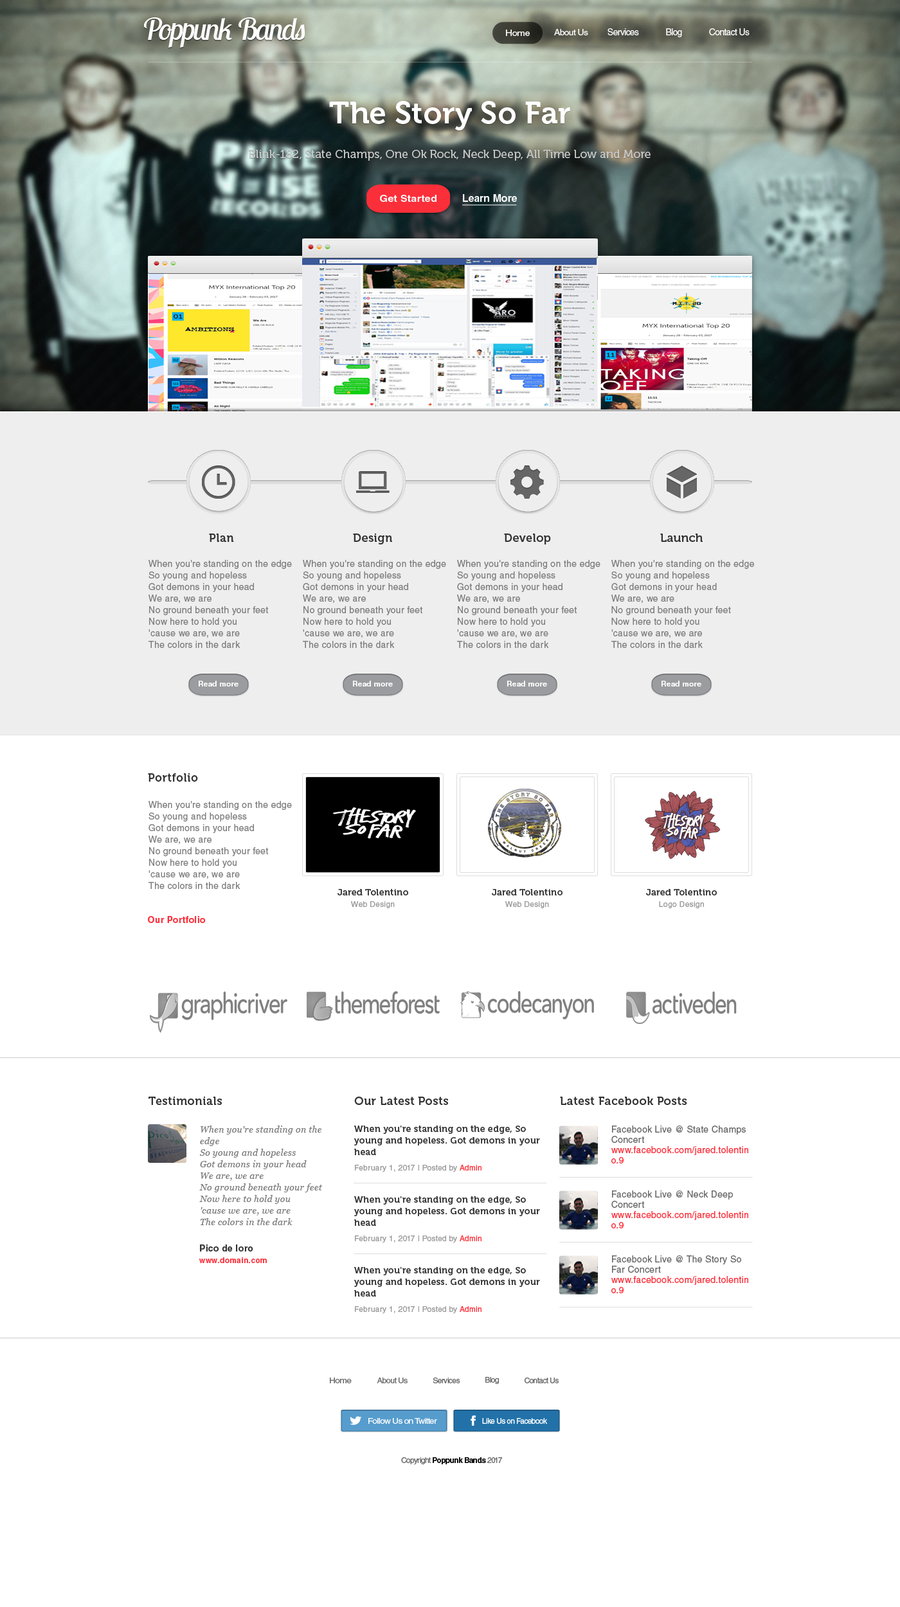
<style>
.page{position:relative;width:900px;height:1607px;background:#ffffff}
.page>*{position:absolute;margin:0}
.t1{font:30.9px "LobsterTwo";letter-spacing:-0.05em;color:#ffffff;font-style:italic}
.t2{font:8.5px "HelveticaLTStd-Roman";letter-spacing:-0.05em;color:#ffffff;scale:1.16 1}
.t3{font:8.5px "HelveticaLTStd-Roman";letter-spacing:-0.05em;color:#ffffff;scale:1.05 1}
.t4{font:9px "HelveticaLTStd-Roman";letter-spacing:-0.05em;color:#ffffff}
.t5{font:30.9px "Museo-700";color:#ffffff}
.t6{font:11.6px "Museo500-Regular";color:#cccccc}
.t7{font:9.7px "HelveticaLTStd-Bold";color:#ffffff;scale:1.1 1}
.t8{font:10.3px "HelveticaLTStd-Bold";color:#ffffff}
.t9{font:11.6px "Museo-700";letter-spacing:0.025em;color:#333333}
.t10{font:9px/11.6px "HelveticaLTStd-Roman";letter-spacing:0.025em;color:#7d7d7d}
.t11{font:7.3px "HelveticaLTStd-Bold";letter-spacing:0.025em;color:#ffffff;scale:1.04 1}
.t12{font:9px/11.6px "Museo-700";letter-spacing:0.025em;color:#333333}
.t13{font:7.7px/11.6px "HelveticaLTStd-Roman";letter-spacing:0.025em;color:#999999}
.t14{font:9px "HelveticaLTStd-Bold";letter-spacing:0.025em;color:#fb2f3a}
.t15{font:9px/11.6px "Georgia-Italic";letter-spacing:0.025em;color:#7d7d7d}
.t16{font:7.7px/15.4px "HelveticaLTStd-Roman";letter-spacing:0.025em;color:#999999}
.t17{font:7.7px/15.4px "HelveticaLTStd-Roman";letter-spacing:0.025em;color:#fb2f3a}
.t18{font:9px/10.3px "HelveticaLTStd-Roman";letter-spacing:0.025em;color:#666666}
.t19{font:9px/10.3px "HelveticaLTStd-Roman";letter-spacing:0.025em;color:#fb2f3a}
.t20{font:7.7px/11.6px "HelveticaLTStd-Bold";letter-spacing:0.025em;color:#fb2f3a}
.t21{font:9px/11.6px "HelveticaLTStd-Bold";letter-spacing:0.025em;color:#333333}
.t22{font:7.7px "HelveticaLTStd-Roman";letter-spacing:-0.05em;color:#666666;scale:1.16 1}
.t23{font:7.7px "HelveticaLTStd-Roman";letter-spacing:-0.05em;color:#666666;scale:1.05 1}
.t24{font:7.7px "HelveticaLTStd-Roman";letter-spacing:-0.05em;color:#666666}
.t25{font:7.7px "HelveticaLTStd-Roman";letter-spacing:-0.05em;color:#ffffff;scale:1.14 1}
.t26{font:7.7px "HelveticaLTStd-Roman";letter-spacing:-0.05em;color:#ffffff}
.t27{font:7.7px "HelveticaLTStd-Bold";letter-spacing:-0.05em;color:#000000}
</style>
<div class="page">
<p class="t1" style="left:143px;top:17px;width:162px;height:31px">Poppunk Bands</p>
<p class="t2" style="left:506px;top:30px;width:24px;height:6px">Home</p>
<p class="t3" style="left:554px;top:29px;width:34px;height:6px">About Us</p>
<p class="t4" style="left:608px;top:28px;width:31px;height:7px">Services</p>
<p class="t4" style="left:666px;top:28px;width:16px;height:9px">Blog</p>
<p class="t4" style="left:709px;top:28px;width:41px;height:7px">Contact Us</p>
<p class="t5" style="left:329px;top:101px;width:241px;height:29px">The Story So Far</p>
<p class="t6" style="left:249px;top:150px;width:402px;height:11px">Blink-182, State Champs, One Ok Rock, Neck Deep, All Time Low and More</p>
<p class="t7" style="left:380px;top:195px;width:57px;height:7px">Get Started</p>
<p class="t8" style="left:463px;top:194px;width:54px;height:8px">Learn More</p>
<p class="t9" style="left:209px;top:534px;width:25px;height:8px">Plan</p>
<p class="t9" style="left:353px;top:534px;width:39px;height:10px">Design</p>
<p class="t9" style="left:504px;top:534px;width:47px;height:10px">Develop</p>
<p class="t9" style="left:660px;top:534px;width:43px;height:8px">Launch</p>
<p class="t10" style="left:148px;top:560px;width:144px;height:88px">When you're standing on the edge<br>So young and hopeless<br>Got demons in your head<br>We are, we are<br>No ground beneath your feet<br>Now here to hold you<br>'cause we are, we are<br>The colors in the dark</p>
<p class="t10" style="left:303px;top:560px;width:143px;height:88px">When you're standing on the edge<br>So young and hopeless<br>Got demons in your head<br>We are, we are<br>No ground beneath your feet<br>Now here to hold you<br>'cause we are, we are<br>The colors in the dark</p>
<p class="t10" style="left:457px;top:560px;width:143px;height:88px">When you're standing on the edge<br>So young and hopeless<br>Got demons in your head<br>We are, we are<br>No ground beneath your feet<br>Now here to hold you<br>'cause we are, we are<br>The colors in the dark</p>
<p class="t10" style="left:611px;top:560px;width:143px;height:88px">When you're standing on the edge<br>So young and hopeless<br>Got demons in your head<br>We are, we are<br>No ground beneath your feet<br>Now here to hold you<br>'cause we are, we are<br>The colors in the dark</p>
<p class="t11" style="left:199px;top:681px;width:40px;height:6px">Read more</p>
<p class="t11" style="left:353px;top:681px;width:40px;height:6px">Read more</p>
<p class="t11" style="left:507px;top:681px;width:40px;height:6px">Read more</p>
<p class="t11" style="left:662px;top:681px;width:39px;height:6px">Read more</p>
<p class="t9" style="left:148px;top:773px;width:50px;height:9px">Portfolio</p>
<p class="t10" style="left:148px;top:801px;width:144px;height:88px">When you're standing on the edge<br>So young and hopeless<br>Got demons in your head<br>We are, we are<br>No ground beneath your feet<br>Now here to hold you<br>'cause we are, we are<br>The colors in the dark</p>
<p class="t12" style="left:338px;top:889px;width:70px;height:19px;text-align:center">Jared Tolentino<br><span class="t13">Web Design</span></p>
<p class="t12" style="left:492px;top:889px;width:70px;height:19px;text-align:center">Jared Tolentino<br><span class="t13">Web Design</span></p>
<p class="t12" style="left:646px;top:889px;width:71px;height:19px;text-align:center">Jared Tolentino<br><span class="t13">Logo Design</span></p>
<p class="t14" style="left:148px;top:916px;width:58px;height:7px">Our Portfolio</p>
<p class="t9" style="left:148px;top:1097px;width:74px;height:8px">Testimonials</p>
<p class="t9" style="left:354px;top:1097px;width:94px;height:8px">Our Latest Posts</p>
<p class="t9" style="left:560px;top:1097px;width:127px;height:8px">Latest Facebook Posts</p>
<p class="t15" style="left:199px;top:1126px;width:124px;height:99px">When you're standing on the edge<br>So young and hopeless<br>Got demons in your head<br>We are, we are<br>No ground beneath your feet<br>Now here to hold you<br>'cause we are, we are<br>The colors in the dark</p>
<p class="t12" style="left:354px;top:1126px;width:186px;height:47px">When you're standing on the edge, So young and hopeless. Got demons in your head<br><span class="t16">February 1, 2017 | Posted by </span><span class="t17">Admin</span></p>
<p class="t18" style="left:611px;top:1126px;width:137px;height:38px">Facebook Live @ State Champs Concert <span class="t19">www.facebook.com/jared.tolentino.9</span></p>
<p class="t19" style="left:611px;top:1191px;width:137px;height:37px"><span class="t18">Facebook Live @ Neck Deep Concert </span>www.facebook.com/jared.tolentino.9</p>
<p class="t12" style="left:354px;top:1196px;width:186px;height:47px">When you're standing on the edge, So young and hopeless. Got demons in your head<br><span class="t16">February 1, 2017 | Posted by </span><span class="t17">Admin</span></p>
<p class="t20" style="left:199px;top:1245px;width:68px;height:18px"><span class="t21">Pico de loro<br></span>www.domain.com</p>
<p class="t18" style="left:611px;top:1256px;width:137px;height:37px">Facebook Live @ The Story So Far Concert <span class="t19">www.facebook.com/jared.tolentino.9</span></p>
<p class="t12" style="left:354px;top:1267px;width:186px;height:47px">When you're standing on the edge, So young and hopeless. Got demons in your head<br><span class="t16">February 1, 2017 | Posted by </span><span class="t17">Admin</span></p>
<p class="t22" style="left:330px;top:1378px;width:22px;height:5px">Home</p>
<p class="t23" style="left:377px;top:1378px;width:31px;height:5px">About Us</p>
<p class="t24" style="left:433px;top:1378px;width:27px;height:5px">Services</p>
<p class="t24" style="left:485px;top:1377px;width:14px;height:7px">Blog</p>
<p class="t24" style="left:525px;top:1378px;width:34px;height:5px">Contact Us</p>
<p class="t25" style="left:368px;top:1418px;width:69px;height:6px">Follow Us on Twitter</p>
<p class="t26" style="left:482px;top:1418px;width:66px;height:6px">Like Us on Facebook</p>
<p class="t27" style="left:401px;top:1457px;width:102px;height:8px"><span class="t24">Copyright </span>Poppunk Bands <span class="t24">2017</span></p>
</div>
